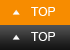
<style>
.page{position:relative;width:70px;height:50px;background:#f78c00}
.page>*{position:absolute;margin:0}
.t1{font:12px "ArialMT";letter-spacing:0.02em;color:#ffffff}
</style>
<div class="page">
<p class="t1" style="left:31px;top:7px;width:24px;height:9px">TOP</p>
<p class="t1" style="left:31px;top:32px;width:24px;height:9px">TOP</p>
</div>
